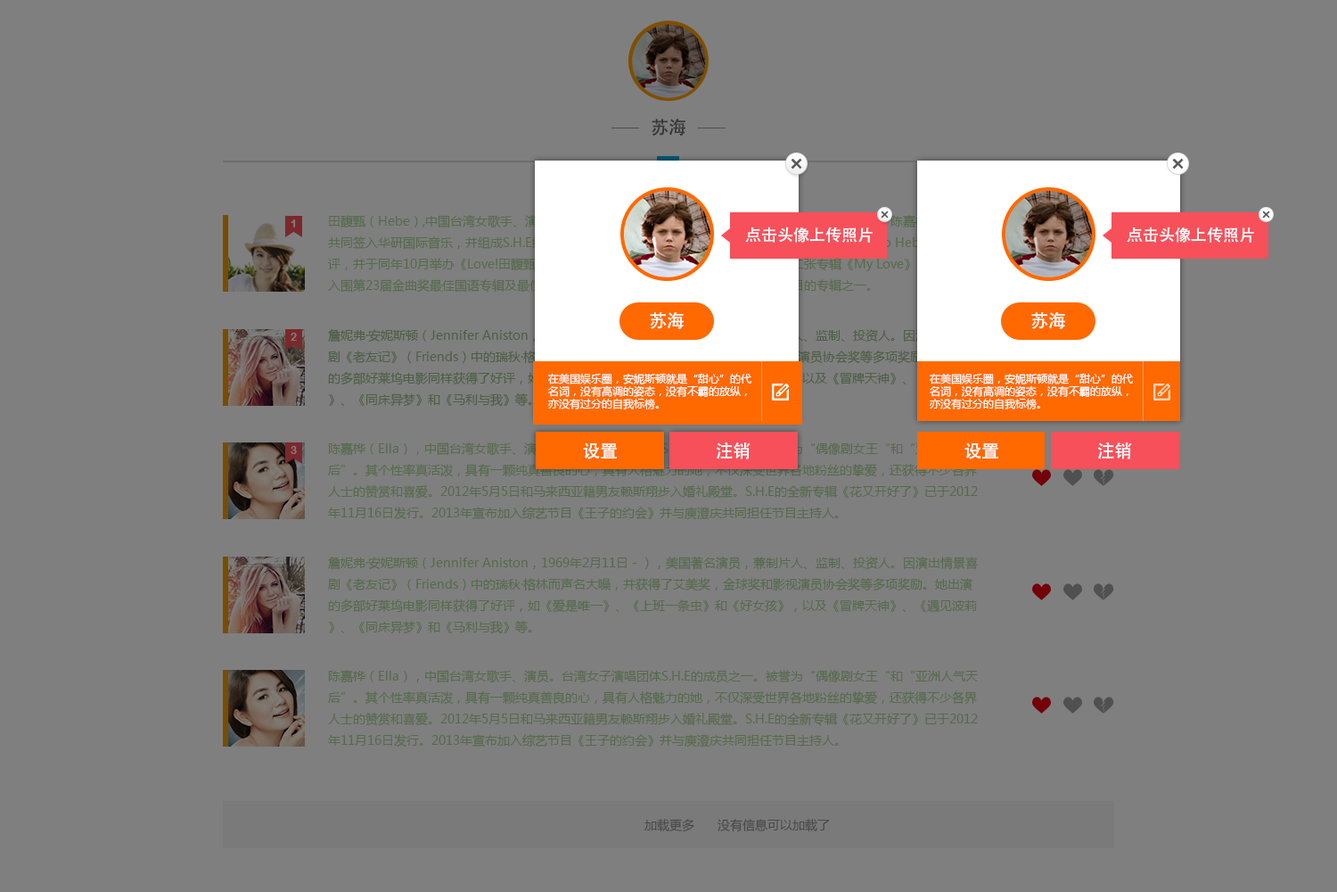
<style>
.page{position:relative;width:1337px;height:892px;background:#7f7f7f}
.page>*{position:absolute;margin:0}
.t1{font:17.7px "AdobeHeitiStd-Regular";color:#383838}
.t2{font:10.7px "ArialRoundedMTBold";color:#7f7f7f}
.t3{font:16px "AdobeHeitiStd-Regular";color:#ffffff}
.t4{font:17.8px "AdobeHeitiStd-Regular";color:#ffffff}
.t5{font:10.7px/12.5px "MicrosoftYaHei";color:#ffffff}
.t6{font:12.5px/21.4px "MicrosoftYaHei";color:#566a4c}
.t7{font:12.5px "MicrosoftYaHei";color:#4a4a4a}
</style>
<div class="page">
<p class="t1" style="left:652px;top:119px;width:34px;height:17px">苏海</p>
<p class="t2" style="left:291px;top:219px;width:5px;height:8px">1</p>
<p class="t3" style="left:745px;top:226px;width:128px;height:17px">点击头像上传照片</p>
<p class="t3" style="left:1127px;top:226px;width:127px;height:17px">点击头像上传照片</p>
<p class="t4" style="left:650px;top:312px;width:34px;height:17px">苏海</p>
<p class="t4" style="left:1032px;top:312px;width:33px;height:17px">苏海</p>
<p class="t2" style="left:291px;top:333px;width:6px;height:8px">2</p>
<p class="t5" style="left:548px;top:373px;width:204px;height:36px">在美国娱乐圈，安妮斯顿就是“甜心”的代名词，没有高调的姿态，没有不羁的放纵，亦没有过分的自我标榜。</p>
<p class="t5" style="left:930px;top:373px;width:203px;height:36px">在美国娱乐圈，安妮斯顿就是“甜心”的代名词，没有高调的姿态，没有不羁的放纵，亦没有过分的自我标榜。</p>
<p class="t2" style="left:291px;top:446px;width:6px;height:8px">3</p>
<p class="t6" style="left:328px;top:442px;width:650px;height:78px">陈嘉桦（Ella），中国台湾女歌手、演员。台湾女子演唱团体S.H.E的成员之一。被誉为“偶像剧女王“和“亚洲人气天后”。其个性率真活泼，具有一颗纯真善良的心，具有人格魅力的她，不仅深受世界各地粉丝的挚爱，还获得不少各界人士的赞赏和喜爱。2012年5月5日和马来西亚籍男友赖斯翔步入婚礼殿堂。S.H.E的全新专辑《花又开好了》已于2012年11月16日发行。2013年宣布加入综艺节目《王子的约会》并与庾澄庆共同担任节目主持人。</p>
<p class="t4" style="left:583px;top:442px;width:34px;height:17px">设置</p>
<p class="t4" style="left:716px;top:442px;width:35px;height:17px">注销</p>
<p class="t4" style="left:965px;top:442px;width:34px;height:17px">设置</p>
<p class="t4" style="left:1098px;top:442px;width:34px;height:17px">注销</p>
<p class="t6" style="left:328px;top:556px;width:650px;height:78px">詹妮弗·安妮斯顿（Jennifer Aniston，1969年2月11日－），美国著名演员，兼制片人、监制、投资人。因演出情景喜剧《老友记》（Friends）中的瑞秋·格林而声名大噪，并获得了艾美奖，金球奖和影视演员协会奖等多项奖励。她出演的多部好莱坞电影同样获得了好评，如《爱是唯一》、《上班一条虫》和《好女孩》，以及《冒牌天神》、《遇见波莉》、《同床异梦》和《马利与我》等。</p>
<p class="t6" style="left:328px;top:670px;width:650px;height:77px">陈嘉桦（Ella），中国台湾女歌手、演员。台湾女子演唱团体S.H.E的成员之一。被誉为“偶像剧女王“和“亚洲人气天后”。其个性率真活泼，具有一颗纯真善良的心，具有人格魅力的她，不仅深受世界各地粉丝的挚爱，还获得不少各界人士的赞赏和喜爱。2012年5月5日和马来西亚籍男友赖斯翔步入婚礼殿堂。S.H.E的全新专辑《花又开好了》已于2012年11月16日发行。2013年宣布加入综艺节目《王子的约会》并与庾澄庆共同担任节目主持人。</p>
<p class="t7" style="left:645px;top:818px;width:50px;height:14px">加载更多</p>
<p class="t7" style="left:718px;top:818px;width:111px;height:14px">没有信息可以加载了</p>
</div>
